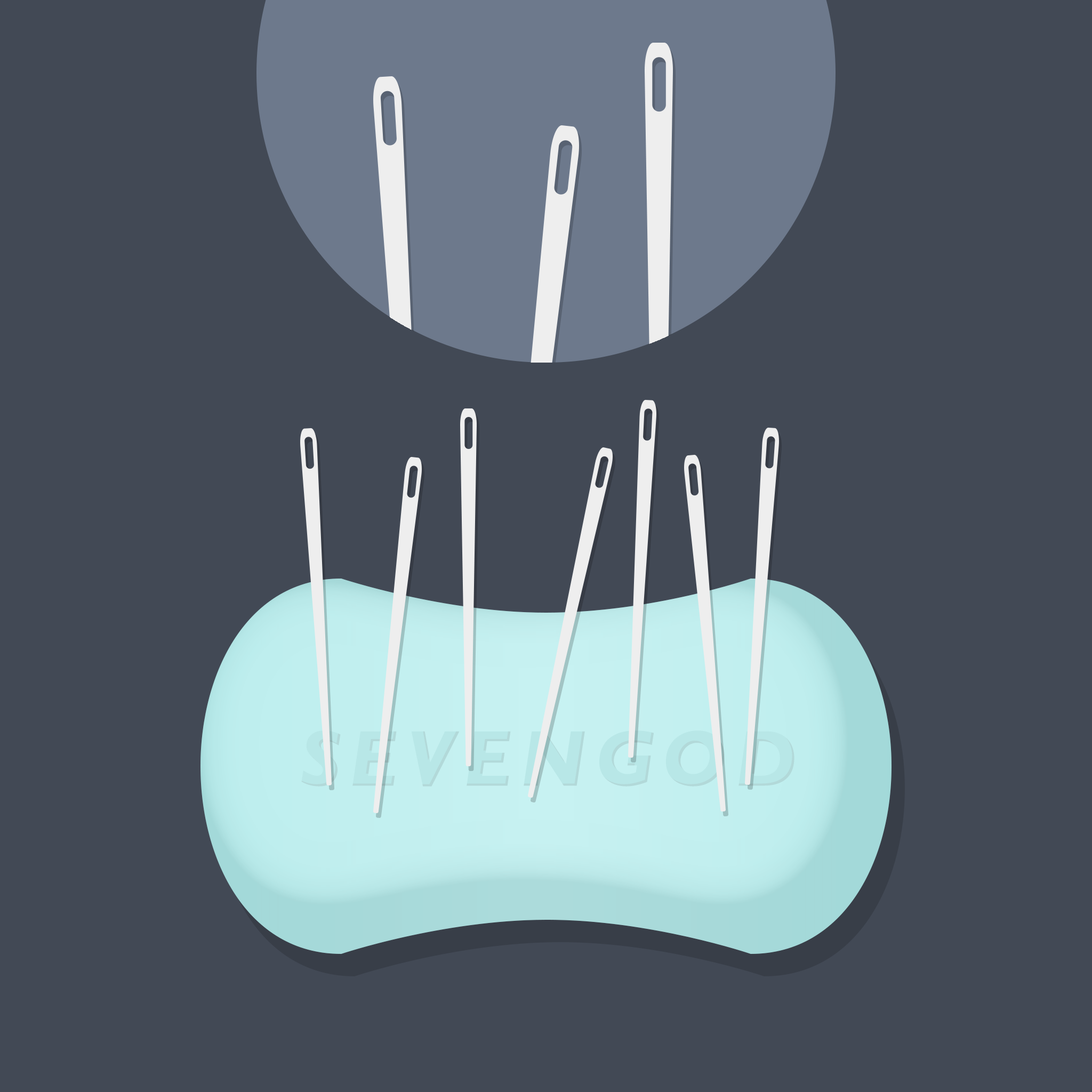
<style>
.page{position:relative;width:1092px;height:1092px;background:#424955}
.page>*{position:absolute;margin:0}
.t1{font:80px "GillSans-BoldItalic";letter-spacing:0.1em;color:#b8e7e7}
</style>
<div class="page">
<p class="t1" style="left:301px;top:730px;width:493px;height:56px">SEVENGOD</p>
</div>
